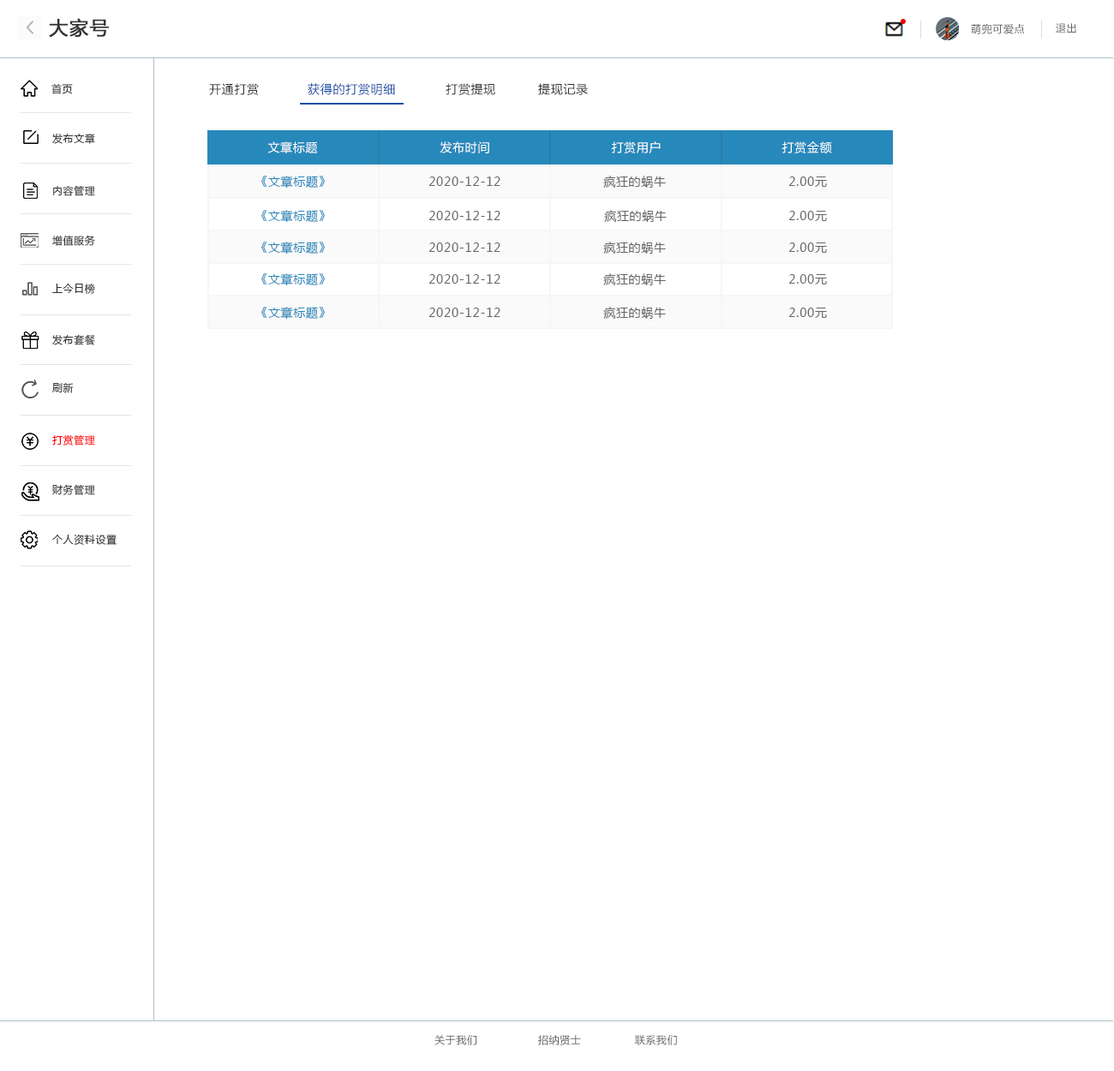
<style>
.page{position:relative;width:1114px;height:1071px;background:#ffffff}
.page>*{position:absolute;margin:0}
.t1{font:18.8px "MicrosoftYaHei";letter-spacing:0.05em;color:#333333;font-weight:bold}
.t2{font:10.3px "MicrosoftYaHei";letter-spacing:0.05em;color:#666666}
.t3{font:10.3px "MicrosoftYaHei";letter-spacing:0.05em;color:#333333}
.t4{font:12px "MicrosoftYaHei";letter-spacing:0.05em;color:#333333}
.t5{font:12px "MicrosoftYaHei";letter-spacing:0.05em;color:#144ea4}
.t6{font:12px "MicrosoftYaHei";letter-spacing:0.05em;color:#ffffff}
.t7{font:12px "MicrosoftYaHei";letter-spacing:0.05em;color:#2789bb}
.t8{font:12px "MicrosoftYaHei";letter-spacing:0.05em;color:#666666}
.t9{font:10.3px "MicrosoftYaHei";letter-spacing:0.05em;color:#ff0000}
</style>
<div class="page">
<p class="t1" style="left:49px;top:18px;width:60px;height:20px">大家号</p>
<p class="t2" style="left:971px;top:24px;width:54px;height:10px">萌兜可爱点</p>
<p class="t2" style="left:1055px;top:23px;width:21px;height:10px">退出</p>
<p class="t3" style="left:51px;top:83px;width:22px;height:11px">首页</p>
<p class="t4" style="left:209px;top:83px;width:50px;height:12px">开通打赏</p>
<p class="t5" style="left:308px;top:83px;width:87px;height:12px">获得的打赏明细</p>
<p class="t4" style="left:445px;top:83px;width:50px;height:12px">打赏提现</p>
<p class="t4" style="left:538px;top:83px;width:50px;height:12px">提现记录</p>
<p class="t3" style="left:52px;top:133px;width:43px;height:11px">发布文章</p>
<p class="t6" style="left:267px;top:141px;width:51px;height:12px">文章标题</p>
<p class="t6" style="left:439px;top:141px;width:50px;height:12px">发布时间</p>
<p class="t6" style="left:611px;top:141px;width:49px;height:12px">打赏用户</p>
<p class="t6" style="left:781px;top:141px;width:51px;height:12px">打赏金额</p>
<p class="t3" style="left:53px;top:185px;width:42px;height:11px">内容管理</p>
<p class="t7" style="left:261px;top:176px;width:64px;height:12px">《文章标题》</p>
<p class="t8" style="left:428px;top:176px;width:72px;height:10px">2020-12-12</p>
<p class="t8" style="left:603px;top:176px;width:63px;height:12px">疯狂的蜗牛</p>
<p class="t8" style="left:788px;top:176px;width:39px;height:11px">2.00元</p>
<p class="t7" style="left:261px;top:210px;width:64px;height:13px">《文章标题》</p>
<p class="t8" style="left:604px;top:210px;width:62px;height:12px">疯狂的蜗牛</p>
<p class="t8" style="left:428px;top:211px;width:72px;height:9px">2020-12-12</p>
<p class="t8" style="left:788px;top:211px;width:39px;height:10px">2.00元</p>
<p class="t3" style="left:52px;top:235px;width:43px;height:11px">增值服务</p>
<p class="t7" style="left:261px;top:242px;width:64px;height:12px">《文章标题》</p>
<p class="t8" style="left:428px;top:242px;width:72px;height:10px">2020-12-12</p>
<p class="t8" style="left:603px;top:242px;width:63px;height:12px">疯狂的蜗牛</p>
<p class="t8" style="left:788px;top:242px;width:39px;height:11px">2.00元</p>
<p class="t7" style="left:261px;top:273px;width:64px;height:13px">《文章标题》</p>
<p class="t8" style="left:428px;top:274px;width:72px;height:10px">2020-12-12</p>
<p class="t8" style="left:603px;top:273px;width:63px;height:12px">疯狂的蜗牛</p>
<p class="t8" style="left:788px;top:274px;width:39px;height:10px">2.00元</p>
<p class="t3" style="left:52px;top:283px;width:43px;height:11px">上今日榜</p>
<p class="t7" style="left:261px;top:307px;width:64px;height:13px">《文章标题》</p>
<p class="t8" style="left:428px;top:308px;width:72px;height:9px">2020-12-12</p>
<p class="t8" style="left:603px;top:307px;width:63px;height:12px">疯狂的蜗牛</p>
<p class="t8" style="left:788px;top:308px;width:39px;height:10px">2.00元</p>
<p class="t3" style="left:52px;top:334px;width:43px;height:11px">发布套餐</p>
<p class="t3" style="left:52px;top:383px;width:22px;height:10px">刷新</p>
<p class="t9" style="left:52px;top:434px;width:43px;height:11px">打赏管理</p>
<p class="t3" style="left:52px;top:484px;width:43px;height:11px">财务管理</p>
<p class="t3" style="left:52px;top:534px;width:65px;height:11px">个人资料设置</p>
<p class="t2" style="left:434px;top:1035px;width:243px;height:10px">关于我们                 招纳贤士               联系我们</p>
</div>
